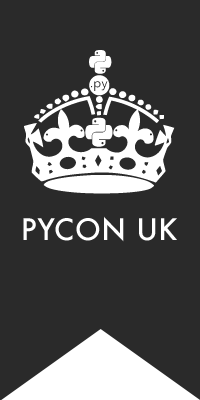
<style>
.page{position:relative;width:200px;height:400px;background:#2a2a2a}
.page>*{position:absolute;margin:0}
.t1{font:28.8px "Futura-Medium";letter-spacing:0.03em;color:#ffffff}
</style>
<div class="page">
<p class="t1" style="left:23px;top:216px;width:154px;height:26px">PYCON UK</p>
</div>
